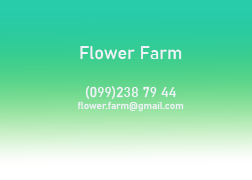
<style>
.page{position:relative;width:252px;height:180px}
.page>*{position:absolute;margin:0}
.t1{font:10px "Bahnschrift";color:#f0f3f9}
.t2{font:18px "Bahnschrift";color:#f0f3f9}
.t3{font:14px "Bahnschrift";color:#f0f3f9}
</style>
<div class="page">
<p class="t1" style="left:77px;top:46px;width:107px;height:66px;text-align:center"><span class="t2">Flower Farm<br><br></span><span class="t3">(099)238 79 44<br></span>flower.farm@gmail.com</p>
</div>
